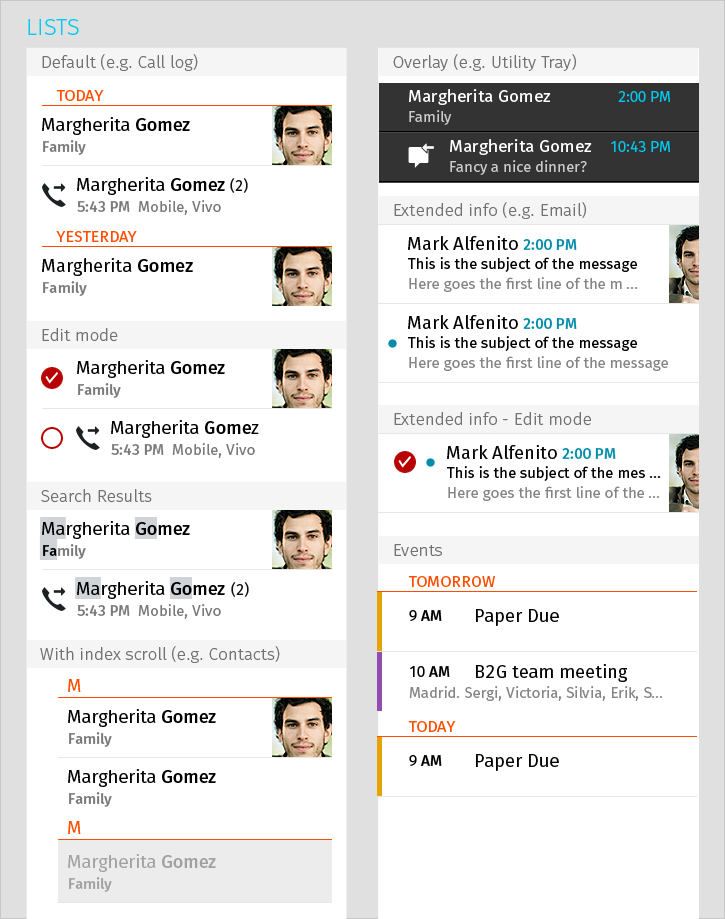
<style>
.page{position:relative;width:725px;height:919px;background:#ffffff}
.page>*{position:absolute;margin:0}
.t1{font:22.9px "MozLight";color:#00caf2;text-transform:uppercase}
.t2{font:17px "MozLight";color:#737272}
.t3{font:17.2px "Moz";color:#ffffff}
.t4{font:16px "Moz";color:#ff4e00;text-transform:uppercase}
.t5{font:14.9px "Moz";color:#01c6ed}
.t6{font:14.9px "Moz";color:#cccccc}
.t7{font:18px "Moz";color:#000000}
.t8{font:18px "MozMedium";color:#000000}
.t9{font:15px "MozMedium";color:#797979}
.t10{font:14.9px "Moz";color:#101010}
.t11{font:14.9px "MozMedium";color:#797979}
.t12{font:14.9px "Moz";color:#797979}
.t13{font:18.3px "Moz";color:#000000}
.t14{font:14.9px "MozMedium";color:#008caa}
.t15{font:14.9px "Moz";color:#000000}
.t16{font:18.3px "MozMedium";color:#000000}
.t17{font:14.9px "Moz";color:#858585}
.t18{font:15px "MozMedium";color:#000000}
.t19{font:15px "Moz";color:#101010}
.t20{font:14.9px "MozMedium";color:#000000}
.t21{font:18px "Moz";color:#ff4e00;text-transform:uppercase}
.t22{font:18px "Moz";color:#a1a1a1}
.t23{font:18px "MozMedium";color:#a1a1a1}
.t24{font:15px "MozMedium";color:#a1a1a1}
</style>
<div class="page">
<p class="t1" style="left:28px;top:19px;width:51px;height:16px">lists</p>
<p class="t2" style="left:42px;top:54px;width:156px;height:17px">Default (e.g. Call log)</p>
<p class="t2" style="left:393px;top:54px;width:183px;height:17px">Overlay (e.g. Utility Tray)</p>
<p class="t3" style="left:409px;top:89px;width:142px;height:16px">Margherita Gomez</p>
<p class="t4" style="left:56px;top:90px;width:48px;height:11px">today</p>
<p class="t5" style="left:618px;top:91px;width:52px;height:11px">2:00 PM</p>
<p class="t6" style="left:409px;top:110px;width:43px;height:15px">Family</p>
<p class="t7" style="left:42px;top:117px;width:148px;height:18px">Margherita <span class="t8">Gomez</span></p>
<p class="t9" style="left:43px;top:140px;width:43px;height:15px">Family</p>
<p class="t3" style="left:450px;top:139px;width:142px;height:16px">Margherita Gomez</p>
<p class="t5" style="left:611px;top:141px;width:59px;height:11px">10:43 PM</p>
<p class="t6" style="left:450px;top:160px;width:137px;height:15px">Fancy a nice dinner?</p>
<p class="t7" style="left:77px;top:177px;width:171px;height:18px">Margherita <span class="t8">Gomez </span><span class="t10">(2)</span></p>
<p class="t11" style="left:77px;top:201px;width:53px;height:11px">5:43 PM</p>
<p class="t12" style="left:138px;top:200px;width:83px;height:15px">Mobile, Vivo</p>
<p class="t2" style="left:394px;top:202px;width:192px;height:17px">Extended info (e.g. Email)</p>
<p class="t4" style="left:56px;top:231px;width:81px;height:11px">yesterday</p>
<p class="t13" style="left:408px;top:236px;width:169px;height:14px">Mark Alfenito <span class="t14">2:00 PM</span></p>
<p class="t15" style="left:408px;top:257px;width:229px;height:15px">This is the subject of the message</p>
<p class="t13" style="left:42px;top:258px;width:151px;height:18px">Margherita <span class="t16">Gomez</span></p>
<p class="t9" style="left:43px;top:281px;width:44px;height:15px"><span class="t11">F</span>amily</p>
<p class="t17" style="left:409px;top:277px;width:229px;height:15px">Here goes the first line of the m ...</p>
<p class="t13" style="left:408px;top:315px;width:169px;height:14px">Mark Alfenito <span class="t14">2:00 PM</span></p>
<p class="t2" style="left:42px;top:328px;width:76px;height:14px">Edit mode</p>
<p class="t15" style="left:408px;top:336px;width:229px;height:15px">This is the subject of the message</p>
<p class="t7" style="left:77px;top:360px;width:148px;height:18px">Margherita <span class="t8">Gomez</span></p>
<p class="t17" style="left:409px;top:356px;width:259px;height:15px">Here goes the first line of the message</p>
<p class="t9" style="left:78px;top:383px;width:43px;height:15px">Family</p>
<p class="t2" style="left:394px;top:412px;width:197px;height:14px">Extended info - Edit mode</p>
<p class="t7" style="left:111px;top:420px;width:148px;height:18px">Margherita<span class="t8"> Gome</span>z</p>
<p class="t11" style="left:111px;top:444px;width:53px;height:11px">5:43 PM</p>
<p class="t12" style="left:172px;top:443px;width:83px;height:15px">Mobile, Vivo</p>
<p class="t13" style="left:447px;top:445px;width:169px;height:14px">Mark Alfenito <span class="t14">2:00 PM</span></p>
<p class="t15" style="left:447px;top:466px;width:214px;height:15px">This is the subject of the mes ...</p>
<p class="t17" style="left:448px;top:486px;width:212px;height:15px">Here goes the first line of the ...</p>
<p class="t2" style="left:41px;top:489px;width:111px;height:14px">Search Results</p>
<p class="t7" style="left:42px;top:521px;width:148px;height:18px">Margherita <span class="t8">Gomez</span></p>
<p class="t9" style="left:43px;top:544px;width:43px;height:15px"><span class="t18">Fa</span>mily</p>
<p class="t2" style="left:394px;top:544px;width:48px;height:13px">Events</p>
<p class="t7" style="left:77px;top:581px;width:148px;height:18px">Margherita <span class="t8">Gomez</span></p>
<p class="t19" style="left:231px;top:582px;width:18px;height:15px">(2)</p>
<p class="t4" style="left:408px;top:576px;width:87px;height:11px">tomorrow</p>
<p class="t11" style="left:77px;top:605px;width:53px;height:11px">5:43 PM</p>
<p class="t12" style="left:138px;top:604px;width:83px;height:15px">Mobile, Vivo</p>
<p class="t20" style="left:409px;top:610px;width:33px;height:11px"><span class="t15">9 </span>AM</p>
<p class="t13" style="left:476px;top:609px;width:83px;height:17px">Paper Due</p>
<p class="t2" style="left:40px;top:646px;width:240px;height:17px">With index scroll (e.g. Contacts)</p>
<p class="t13" style="left:476px;top:664px;width:151px;height:18px">B2G team meeting</p>
<p class="t15" style="left:410px;top:666px;width:40px;height:11px">10 <span class="t20">AM</span></p>
<p class="t21" style="left:68px;top:679px;width:13px;height:13px">M</p>
<p class="t17" style="left:409px;top:686px;width:254px;height:15px">Madrid. Sergi, Victoria, Silvia, Erik, S...</p>
<p class="t7" style="left:68px;top:709px;width:148px;height:18px">Margherita <span class="t8">Gomez</span></p>
<p class="t4" style="left:408px;top:721px;width:48px;height:11px">today</p>
<p class="t9" style="left:69px;top:732px;width:43px;height:15px">Family</p>
<p class="t20" style="left:409px;top:755px;width:33px;height:11px"><span class="t15">9 </span>AM</p>
<p class="t13" style="left:476px;top:754px;width:83px;height:17px">Paper Due</p>
<p class="t7" style="left:68px;top:769px;width:148px;height:18px">Margherita <span class="t8">Gomez</span></p>
<p class="t9" style="left:69px;top:792px;width:43px;height:15px">Family</p>
<p class="t21" style="left:68px;top:821px;width:13px;height:13px">M</p>
<p class="t22" style="left:68px;top:854px;width:148px;height:18px">Margherita <span class="t23">Gomez</span></p>
<p class="t24" style="left:69px;top:877px;width:43px;height:15px">Family</p>
</div>
